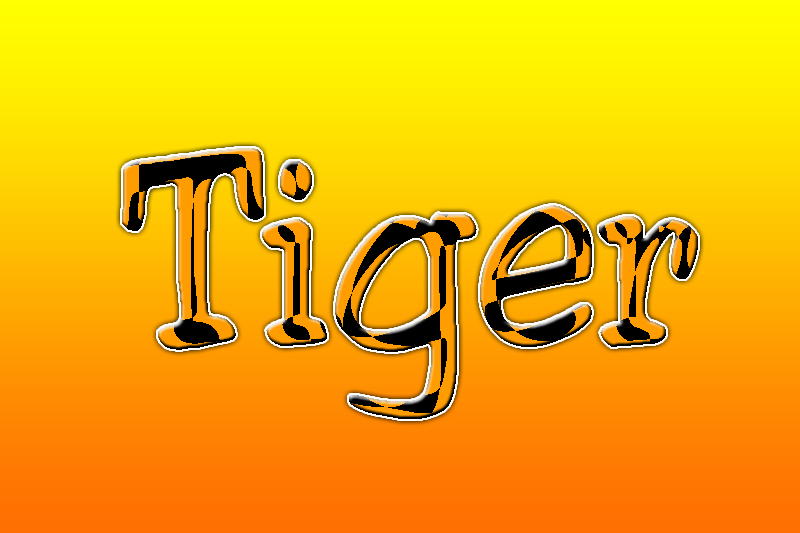
<style>
.page{position:relative;width:800px;height:533px}
.page>*{position:absolute;margin:0}
.t1{font:250px "Toledo"}
</style>
<div class="page">
<p class="t1" style="left:122px;top:148px;width:576px;height:271px">Tiger</p>
</div>
